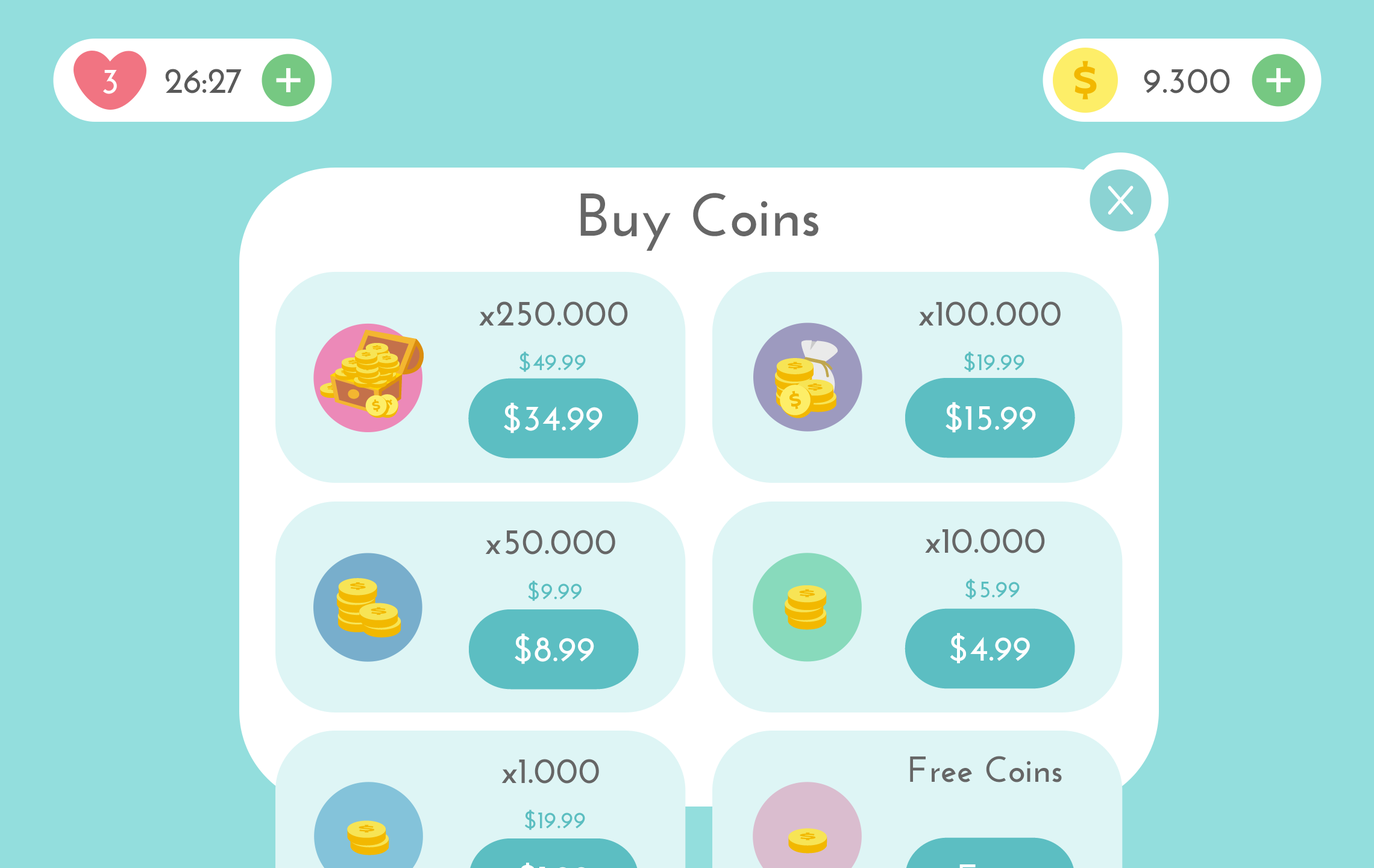
<style>
.page{position:relative;width:1374px;height:868px;background:#93dedd}
.page>*{position:absolute;margin:0}
.t1{font:36.2px "JosefinSans-Bold";color:#ffffff}
.t2{font:36.2px "JosefinSans-Bold";color:#595959}
.t3{font:60.3px "JosefinSans-Bold";color:#666666}
.t4{font:36.2px "JosefinSans-Bold";color:#666666}
.t5{font:24.1px "JosefinSans-Bold";color:#5bbec1}
.t6{font:24.1px "JosefinSans-Bold";color:#5abec0}
</style>
<div class="page">
<p class="t1" style="left:103px;top:70px;width:14px;height:24px">3</p>
<p class="t2" style="left:165px;top:69px;width:77px;height:24px">26:27</p>
<p class="t2" style="left:1144px;top:69px;width:86px;height:24px">9.300</p>
<p class="t3" style="left:580px;top:193px;width:238px;height:58px">Buy Coins</p>
<p class="t4" style="left:479px;top:301px;width:149px;height:25px">x250.000</p>
<p class="t4" style="left:918px;top:301px;width:143px;height:25px">x100.000</p>
<p class="t5" style="left:519px;top:351px;width:67px;height:21px">$49.99</p>
<p class="t6" style="left:964px;top:351px;width:61px;height:21px">$19.99</p>
<p class="t1" style="left:946px;top:402px;width:90px;height:31px">$15.99</p>
<p class="t1" style="left:504px;top:403px;width:99px;height:30px">$34.99</p>
<p class="t4" style="left:485px;top:530px;width:130px;height:24px">x50.000</p>
<p class="t4" style="left:925px;top:529px;width:120px;height:24px">x10.000</p>
<p class="t6" style="left:528px;top:580px;width:54px;height:21px">$9.99</p>
<p class="t6" style="left:965px;top:579px;width:55px;height:20px">$5.99</p>
<p class="t1" style="left:515px;top:633px;width:79px;height:31px">$8.99</p>
<p class="t1" style="left:950px;top:633px;width:80px;height:31px">$4.99</p>
<p class="t4" style="left:501px;top:759px;width:98px;height:24px">x1.000</p>
<p class="t4" style="left:910px;top:756px;width:152px;height:26px">Free Coins</p>
<p class="t5" style="left:525px;top:809px;width:60px;height:21px">$19.99</p>
</div>
